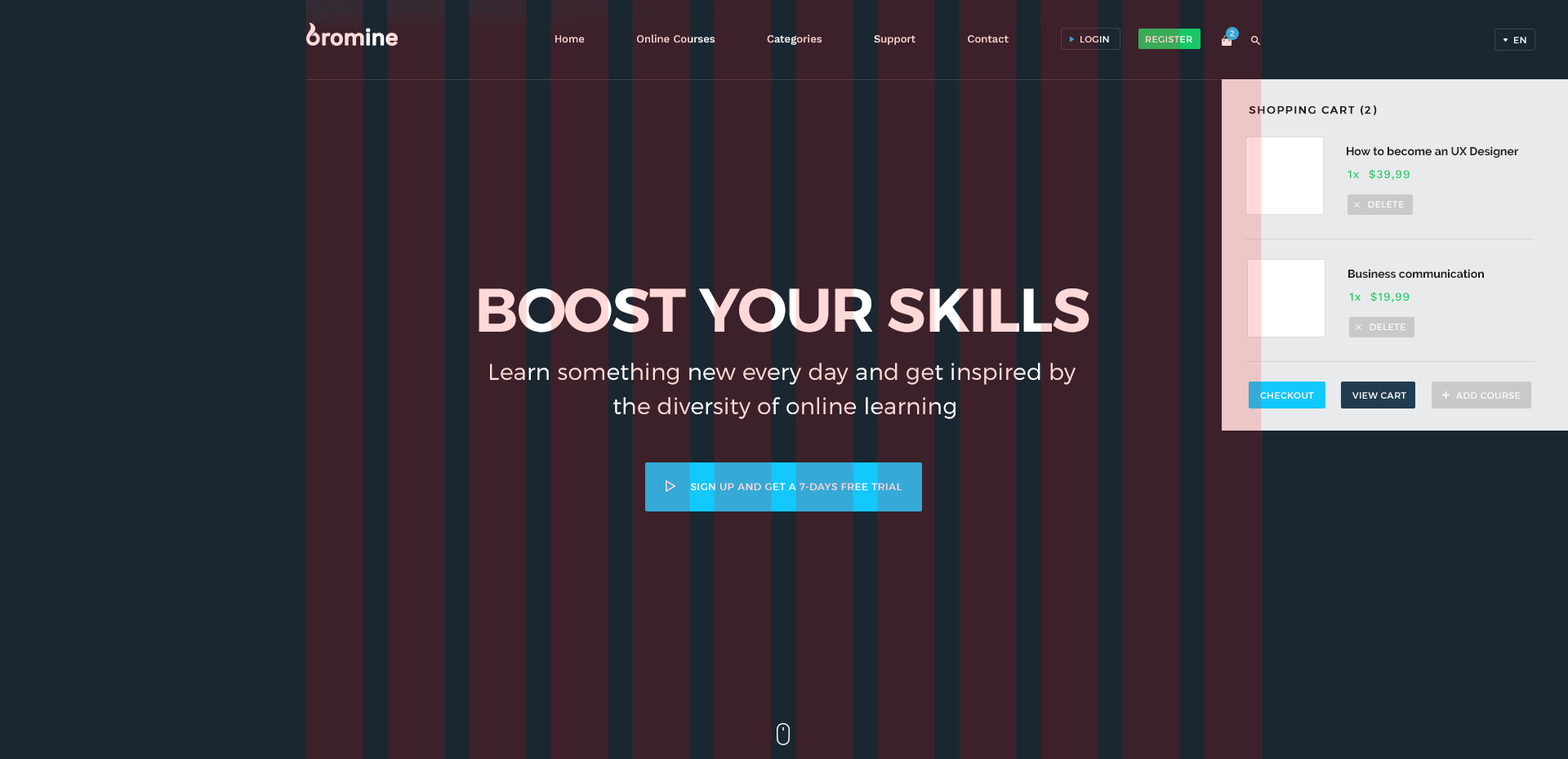
<style>
.page{position:relative;width:1568px;height:759px;background:#1a2731}
.page>*{position:absolute;margin:0}
.t1{font:10.6px "WorkSans-Medium";color:#ffd9d9}
.t2{font:9px "Montserrat-Regular";letter-spacing:0.04em;text-transform:uppercase}
.t3{font:9px "Montserrat-Regular";letter-spacing:0.04em;color:#ffd9d9;text-transform:uppercase}
.t4{font:8.2px "Montserrat-Regular";letter-spacing:0.1em;color:#ffd9d9}
.t5{font:9px "Montserrat-Regular";letter-spacing:0.04em;color:#ffffff;text-transform:uppercase}
.t6{font:10.6px "Montserrat-Regular";letter-spacing:0.1em;color:#202020;text-transform:uppercase;font-weight:bold}
.t7{font:11.4px "Raleway-Bold";color:#202020}
.t8{font:11.4px "WorkSans-Medium";letter-spacing:0.06em;color:#18c967}
.t9{font:61.2px "Montserrat-SemiBold";letter-spacing:-0.02em;color:#ffd9d9}
.t10{font:22.9px/34.3px "Montserrat-Light";letter-spacing:0.01em}
.t11{font:9.8px "Montserrat-Regular";letter-spacing:0.05em;text-transform:uppercase}
</style>
<div class="page">
<p class="t1" style="left:555px;top:34px;width:454px;height:11px">Home               Online Courses               Categories               Support               Contact</p>
<p class="t2" style="left:1080px;top:36px;width:29px;height:6px">LOGIN</p>
<p class="t3" style="left:1146px;top:36px;width:46px;height:6px">Register</p>
<p class="t4" style="left:1230px;top:30px;width:5px;height:7px">2</p>
<p class="t5" style="left:1514px;top:37px;width:12px;height:6px">EN</p>
<p class="t6" style="left:1249px;top:105px;width:128px;height:10px">Shopping cart (2)</p>
<p class="t7" style="left:1347px;top:146px;width:172px;height:12px">How to become an UX Designer</p>
<p class="t8" style="left:1348px;top:169px;width:62px;height:11px">1x  $39,99</p>
<p class="t5" style="left:1368px;top:201px;width:36px;height:6px">DELETE</p>
<p class="t7" style="left:1348px;top:269px;width:136px;height:9px">Business communication</p>
<p class="t9" style="left:479px;top:288px;width:610px;height:44px">BOOST YOUR SKILLS</p>
<p class="t8" style="left:1349px;top:292px;width:61px;height:11px">1x  $19,99</p>
<p class="t5" style="left:1370px;top:323px;width:35px;height:7px">DELETE</p>
<p class="t10" style="left:490px;top:363px;width:586px;height:56px;text-align:center">Learn something new every day and get inspired by <br>the diversity of online learning</p>
<p class="t5" style="left:1260px;top:392px;width:54px;height:7px">CHECKOUT</p>
<p class="t5" style="left:1352px;top:392px;width:54px;height:7px">VIEW CART</p>
<p class="t5" style="left:1456px;top:392px;width:64px;height:7px">ADD COURSE</p>
<p class="t11" style="left:690px;top:483px;width:212px;height:7px">SIGN UP AND GET A 7-DAYS FREE TRIAL</p>
</div>
